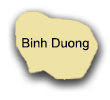
<style>
.page{position:relative;width:110px;height:100px;background:#ffffff}
.page>*{position:absolute;margin:0}
.t1{font:13px "ArialMT";color:#030303}
</style>
<div class="page">
<p class="t1" style="left:22px;top:38px;width:67px;height:13px">Binh Duong</p>
</div>
